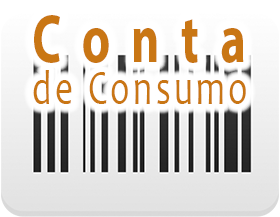
<style>
.page{position:relative;width:280px;height:217px;background:#ffffff}
.page>*{position:absolute;margin:0}
.t1{font:49.4px "Candara";letter-spacing:0.1em;color:#c97614;scale:0.71 1}
.t2{font:68.8px "MyriadPro-Bold";letter-spacing:0.44em;color:#c97614;scale:0.71 1}
</style>
<div class="page">
<p class="t1" style="left:33px;top:15px;width:213px;height:89px"><span class="t2">Conta<br></span>de Consumo</p>
</div>
